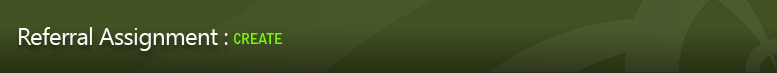
<style>
.page{position:relative;width:777px;height:73px;background:#415122}
.page>*{position:absolute;margin:0}
.t1{font:24px "SegoeUI";letter-spacing:-0.025em;color:#faf7f5}
.t2{font:14px "BellGothicStd-Bold";letter-spacing:-0.05em;color:#7af40e}
</style>
<div class="page">
<p class="t1" style="left:19px;top:27px;width:209px;height:24px">Referral Assignment :</p>
<p class="t2" style="left:234px;top:33px;width:49px;height:11px">CREATE</p>
</div>
